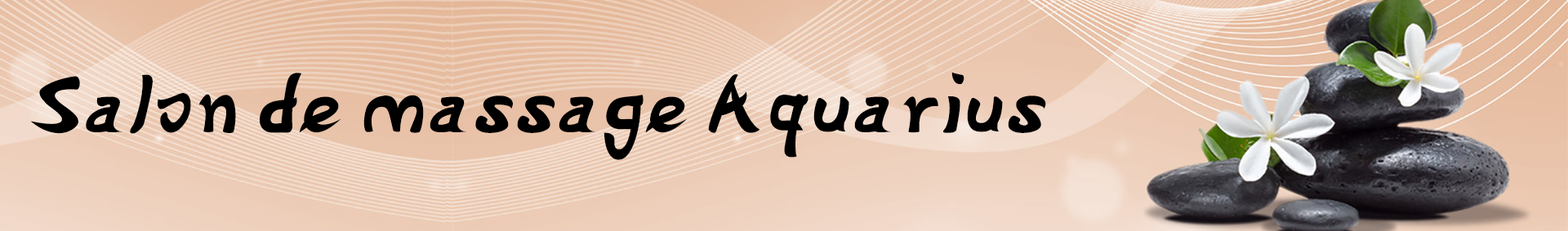
<style>
.page{position:relative;width:1568px;height:231px}
.page>*{position:absolute;margin:0}
.t1{font:81.7px "Gyosho";color:#000000;font-style:italic}
</style>
<div class="page">
<p class="t1" style="left:30px;top:72px;width:1016px;height:88px">Salon de massage Aquarius</p>
</div>
